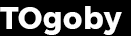
<style>
.page{position:relative;width:131px;height:36px;background:#000000}
.page>*{position:absolute;margin:0}
.t1{font:30px "Montserrat-Bold";letter-spacing:0.025em;color:#fefefe}
</style>
<div class="page">
<p class="t1" style="left:0px;top:6px;width:122px;height:29px">TOgoby</p>
</div>
